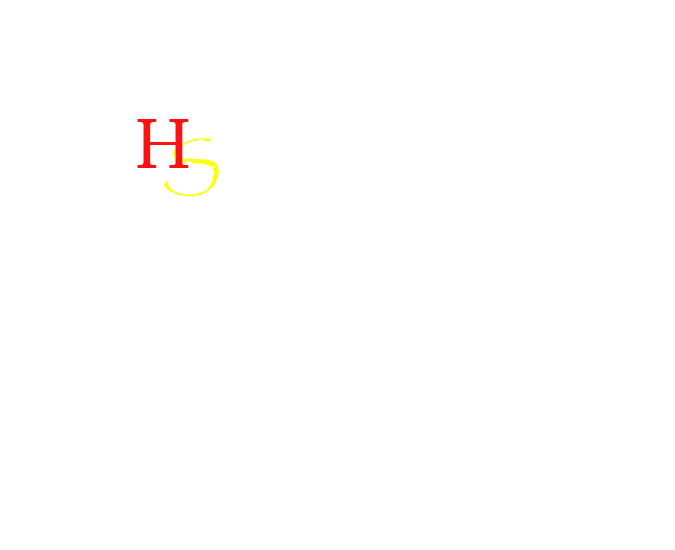
<style>
.page{position:relative;width:675px;height:550px;background:#ffffff}
.page>*{position:absolute;margin:0}
.t1{font:72px "BookmanOldStyle";color:#fe1111}
.t2{font:60px "Papyrus-Regular";color:#fbfe11}
</style>
<div class="page">
<p class="t1" style="left:137px;top:119px;width:52px;height:49px">H</p>
<p class="t2" style="left:164px;top:138px;width:55px;height:59px">S</p>
</div>
